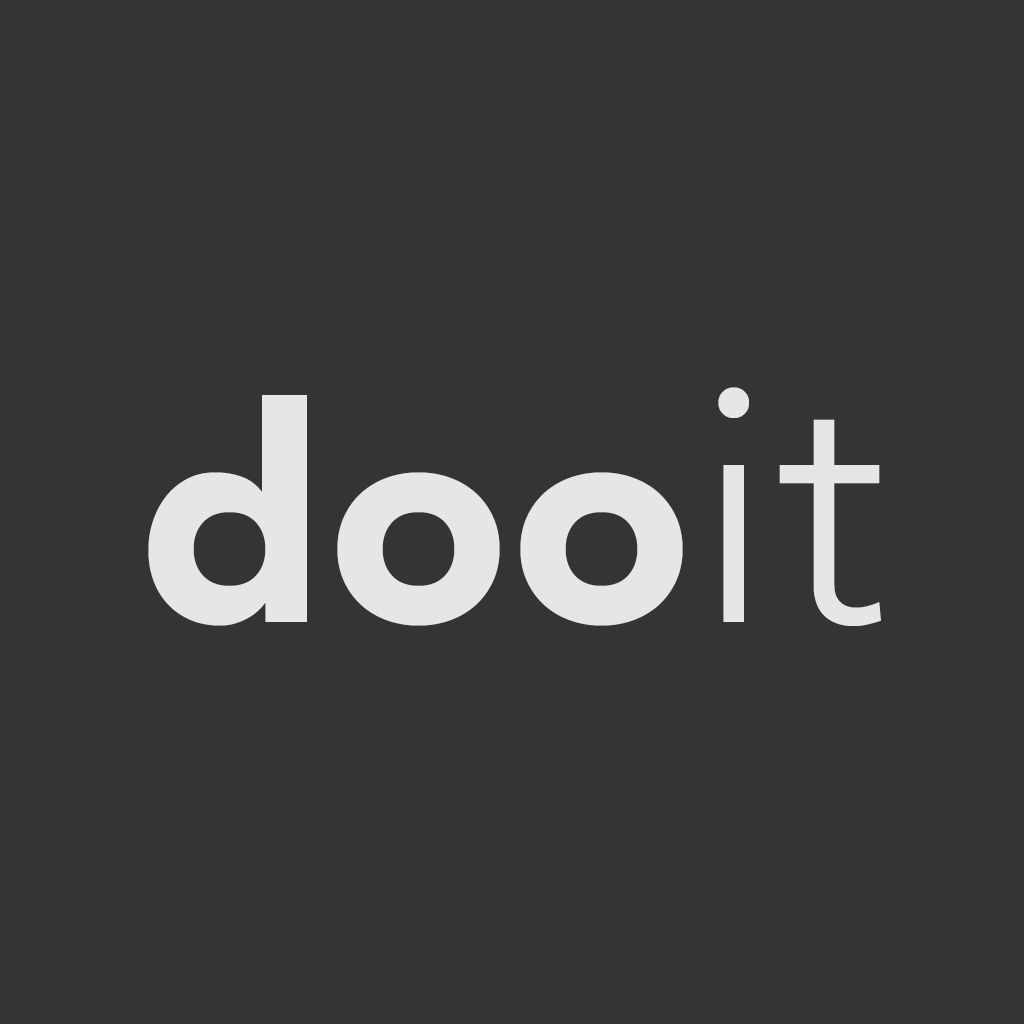
<style>
.page{position:relative;width:1024px;height:1024px;background:#343434}
.page>*{position:absolute;margin:0}
.t1{font:300px "Avenir-Black";color:#e6e6e6}
.t2{font:340px "Avenir-Light";color:#e6e6e6}
</style>
<div class="page">
<p class="t1" style="left:148px;top:387px;width:733px;height:239px">doo<span class="t2">it</span></p>
</div>
